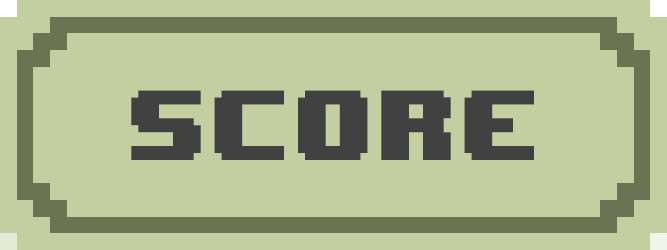
<style>
.page{position:relative;width:667px;height:250px;background:#c4cfa1}
.page>*{position:absolute;margin:0}
.t1{font:83.3px "8BITWONDERNominal";color:#414141}
</style>
<div class="page">
<p class="t1" style="left:131px;top:90px;width:403px;height:70px">SCORE</p>
</div>
